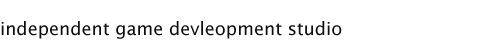
<style>
.page{position:relative;width:500px;height:40px;background:#ffffff}
.page>*{position:absolute;margin:0}
.t1{font:18px "LucidaSans";color:#0e0e0e}
</style>
<div class="page">
<p class="t1" style="left:1px;top:21px;width:341px;height:18px">independent game devleopment studio</p>
</div>
